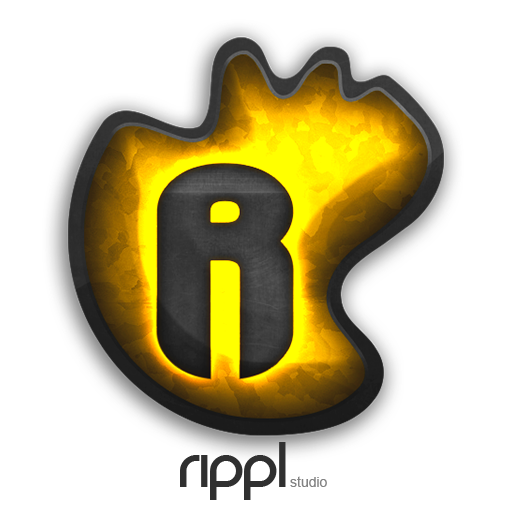
<style>
.page{position:relative;width:512px;height:512px;background:#ffffff}
.page>*{position:absolute;margin:0}
.t1{font:72px "REZ";color:#303030}
.t2{font:14px "ArialMT";color:#838383}
</style>
<div class="page">
<p class="t1" style="left:180px;top:442px;width:106px;height:58px">Rippl</p>
<p class="t2" style="left:290px;top:476px;width:37px;height:11px">studio</p>
</div>
